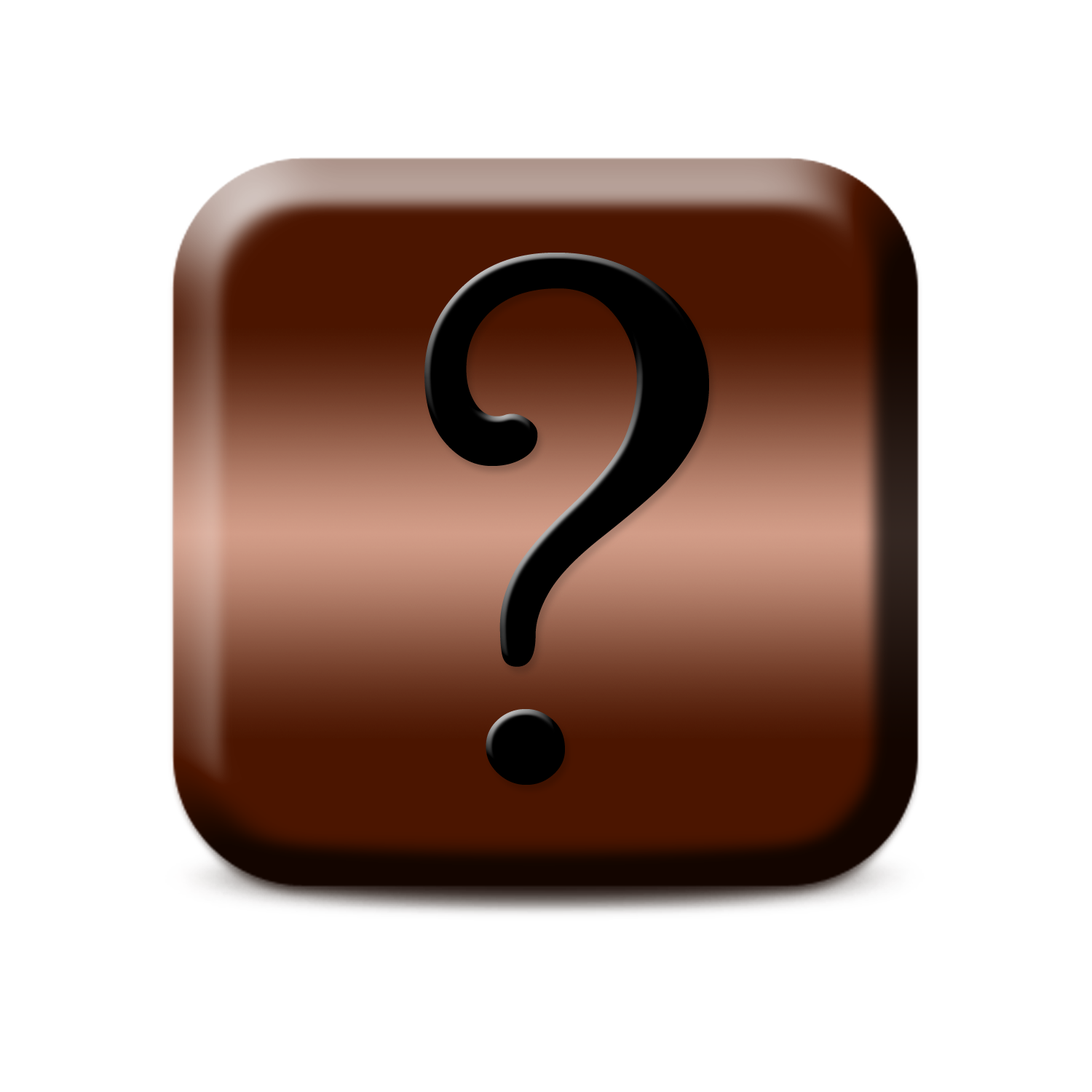
<style>
.page{position:relative;width:1092px;height:1092px;background:#ffffff}
.page>*{position:absolute;margin:0}
.t1{font:740.5px "PoorRichard-Regular";color:#000000}
</style>
<div class="page">
<p class="t1" style="left:424px;top:253px;width:285px;height:532px">?</p>
</div>
